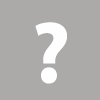
<style>
.page{position:relative;width:100px;height:100px;background:#aca9a9}
.page>*{position:absolute;margin:0}
.t1{font:87.5px "MyriadPro-Bold";letter-spacing:-0.03em;color:#fffefe}
</style>
<div class="page">
<p class="t1" style="left:35px;top:22px;width:32px;height:62px">?</p>
</div>
